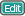
<style>
.page{position:relative;width:25px;height:16px}
.page>*{position:absolute;margin:0}
.t1{font:9px "UDShinGoPro-Light";letter-spacing:-0.04em;color:#ffffff}
</style>
<div class="page">
<p class="t1" style="left:5px;top:4px;width:16px;height:8px">Edit</p>
</div>
